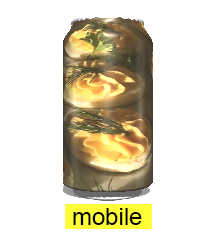
<style>
.page{position:relative;width:216px;height:232px;background:#ffffff}
.page>*{position:absolute;margin:0}
.t1{font:24px "ArialMT";color:#000000}
</style>
<div class="page">
<p class="t1" style="left:73px;top:208px;width:69px;height:17px">mobile</p>
</div>
